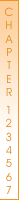
<style>
.page{position:relative;width:19px;height:200px;background:#ffffff}
.page>*{position:absolute;margin:0}
.t1{font:11.1px "AvantGardeITCbyBT-Book";color:#e18518}
</style>
<div class="page">
<p class="t1" style="left:5px;top:7px;width:8px;height:89px;text-align:center">C<br>H<br>A<br>P<br>T<br>E<br>R</p>
<p class="t1" style="left:6px;top:106px;width:6px;height:88px;text-align:center">1<br>2<br>3<br>4<br>5<br>6<br>7</p>
</div>
